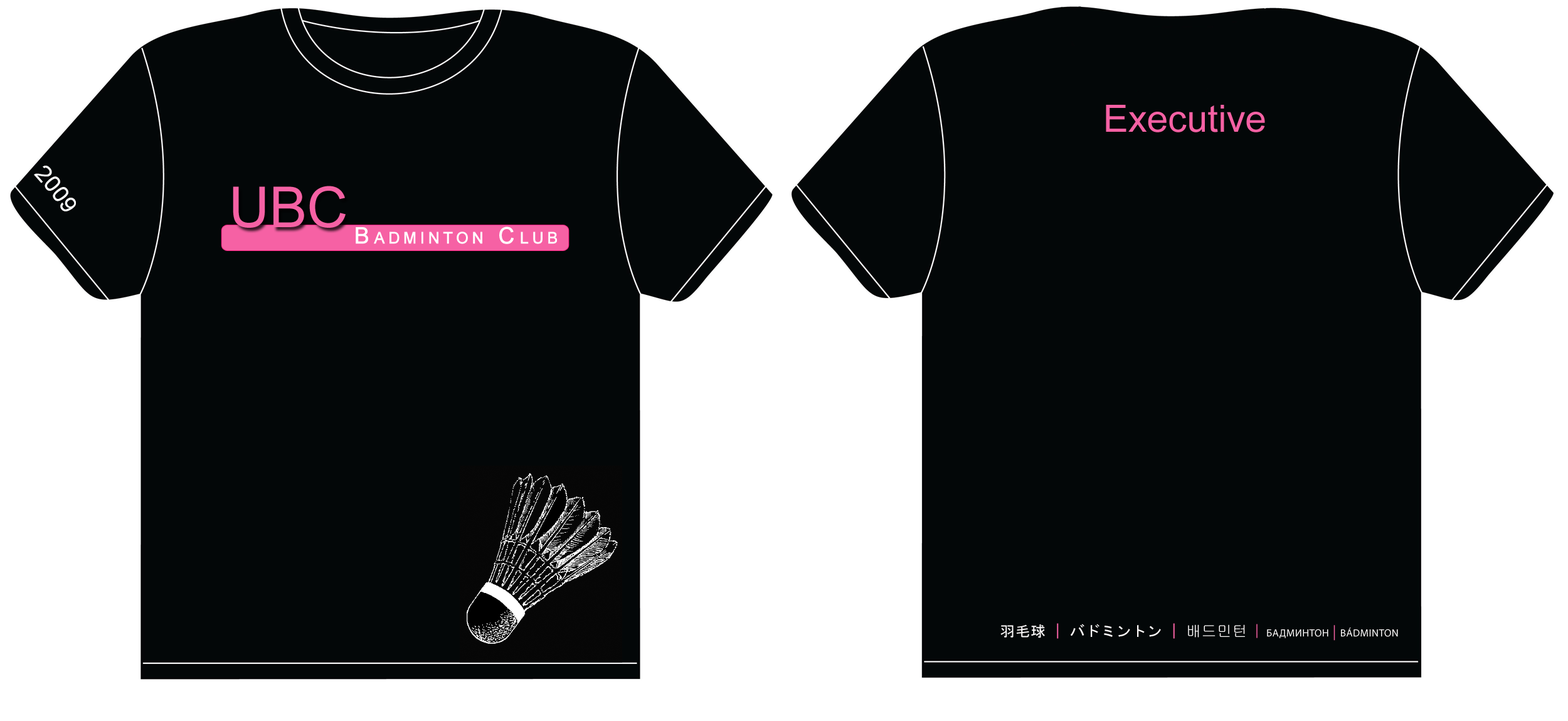
<style>
.page{position:relative;width:1568px;height:721px;background:#030708}
.page>*{position:absolute;margin:0}
.t1{font:37.6px "ArialMT";color:#f661a4}
.t2{font:22.6px "ArialMT";color:#ffffff}
.t3{font:56.4px "ArialMT";color:#f661a4}
.t4{font:22.6px "ArialMT";letter-spacing:0.2em;color:#ffffff;font-variant:small-caps;font-weight:bold}
.t5{font:15.1px "MyriadPro-Regular";letter-spacing:0.025em;color:#fdfafa;font-variant:small-caps}
.t6{font:15.1px "MS-Gothic";letter-spacing:0.025em;color:#fdfafa;font-variant:small-caps}
.t7{font:15.1px "MS-Gothic";letter-spacing:0.025em;color:#f661a4;font-variant:small-caps}
.t8{font:15.1px "Gulim";letter-spacing:0.025em;color:#fdfafa;font-variant:small-caps}
.t9{font:15.1px "Gulim";letter-spacing:0.025em;color:#f661a4;font-variant:small-caps}
.t10{font:15.1px "MyriadPro-Regular";letter-spacing:0.025em;color:#f661a4;font-variant:small-caps}
</style>
<div class="page">
<p class="t1" style="left:1106px;top:105px;width:159px;height:27px">Executive</p>
<p class="t2" style="left:34px;top:166px;width:42px;height:45px;rotate:52deg">2009</p>
<p class="t3" style="left:233px;top:186px;width:113px;height:42px">UBC</p>
<p class="t4" style="left:356px;top:226px;width:201px;height:18px">Badminton Club</p>
<p class="t5" style="left:1000px;top:623px;width:398px;height:17px"><span class="t6">羽毛球 </span><span class="t7">|</span><span class="t6"> バドミントン </span><span class="t7">| </span><span class="t8">배드민턴 </span><span class="t9">| </span>бадминтон <span class="t10">|</span> bádminton</p>
</div>
